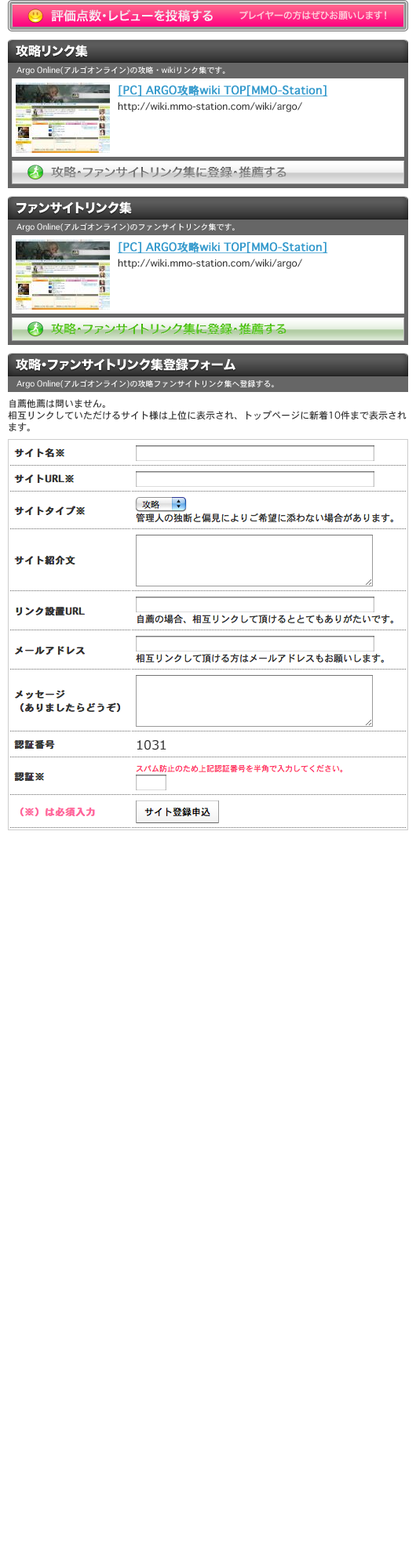
<style>
.page{position:relative;width:416px;height:1568px;background:#ffffff}
.page>*{position:absolute;margin:0}
.t1{font:12.5px "HiraKakuPro-W6";color:#f7eff3}
.t2{font:9.4px "HiraKakuPro-W6";color:#ffccd9}
.t3{font:12.5px "HiraKakuStd-W8";color:#ffffff}
.t4{font:7.8px "Osaka";color:#ffffff}
.t5{font:11px "Osaka";color:#3399cc;font-weight:bold;text-decoration:underline}
.t6{font:9.4px "Osaka";color:#333333}
.t7{font:12.5px "HiraKakuPro-W6"}
.t8{font:9.4px/11.8px "Osaka";color:#333333}
</style>
<div class="page">
<p class="t1" style="left:51px;top:9px;width:161px;height:13px">評価点数・レビューを投稿する</p>
<p class="t1" style="left:51px;top:9px;width:161px;height:13px">評価点数・レビューを投稿する</p>
<p class="t2" style="left:239px;top:11px;width:147px;height:9px">プレイヤーの方はぜひお願いします！</p>
<p class="t2" style="left:239px;top:11px;width:147px;height:9px">プレイヤーの方はぜひお願いします！</p>
<p class="t3" style="left:16px;top:45px;width:72px;height:12px">攻略リンク集</p>
<p class="t4" style="left:16px;top:66px;width:209px;height:9px">Argo Online(アルゴオンライン)の攻略・wikiリンク集です。</p>
<p class="t5" style="left:118px;top:85px;width:210px;height:11px">[PC] ARGO攻略wiki TOP[MMO-Station]</p>
<p class="t6" style="left:118px;top:102px;width:184px;height:10px">http://wiki.mmo-station.com/wiki/argo/</p>
<p class="t7" style="left:51px;top:166px;width:235px;height:13px">攻略・ファンサイトリンク集に登録・推薦する</p>
<p class="t3" style="left:16px;top:201px;width:116px;height:13px">ファンサイトリンク集</p>
<p class="t4" style="left:16px;top:223px;width:218px;height:9px">Argo Online(アルゴオンライン)のファンサイトリンク集です。</p>
<p class="t5" style="left:118px;top:241px;width:210px;height:12px">[PC] ARGO攻略wiki TOP[MMO-Station]</p>
<p class="t6" style="left:118px;top:259px;width:184px;height:10px">http://wiki.mmo-station.com/wiki/argo/</p>
<p class="t7" style="left:51px;top:323px;width:235px;height:13px">攻略・ファンサイトリンク集に登録・推薦する</p>
<p class="t3" style="left:16px;top:358px;width:219px;height:13px">攻略・ファンサイトリンク集登録フォーム</p>
<p class="t4" style="left:16px;top:379px;width:258px;height:10px">Argo Online(アルゴオンライン)の攻略ファンサイトリンク集へ登録する。</p>
<p class="t8" style="left:8px;top:399px;width:398px;height:33px">自薦他薦は問いません。<br>相互リンクしていただけるサイト様は上位に表示され、トップページに新着10件まで表示されます。</p>
</div>
